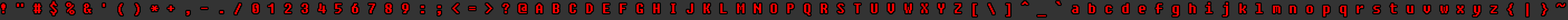
<style>
.page{position:relative;width:1568px;height:20px;background:#333333}
.page>*{position:absolute;margin:0}
.t1{font:13.4px "Fixedsys";color:#ff0000}
</style>
<div class="page">
<p class="t1" style="left:1px;top:1px;width:1564px;height:15px">! " # $ % &amp; ' ( ) * + , - . / 0 1 2 3 4 5 6 7 8 9 : ; &lt; = &gt; ? @ A B C D E F G H I J K L M N O P Q R S T U V W X Y Z [ \ ] ^ _ ` a b c d e f g h i j k l m n o p q r s t u v w x y z { | } ~</p>
</div>
